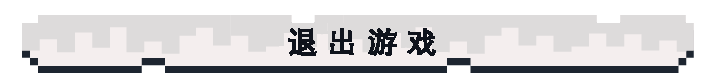
<style>
.page{position:relative;width:716px;height:83px;background:#ffffff}
.page>*{position:absolute;margin:0}
.t1{font:30px "DengXian-Bold";color:#0f131c;font-weight:bold}
</style>
<div class="page">
<p class="t1" style="left:288px;top:28px;width:148px;height:28px">退 出 游 戏</p>
</div>
